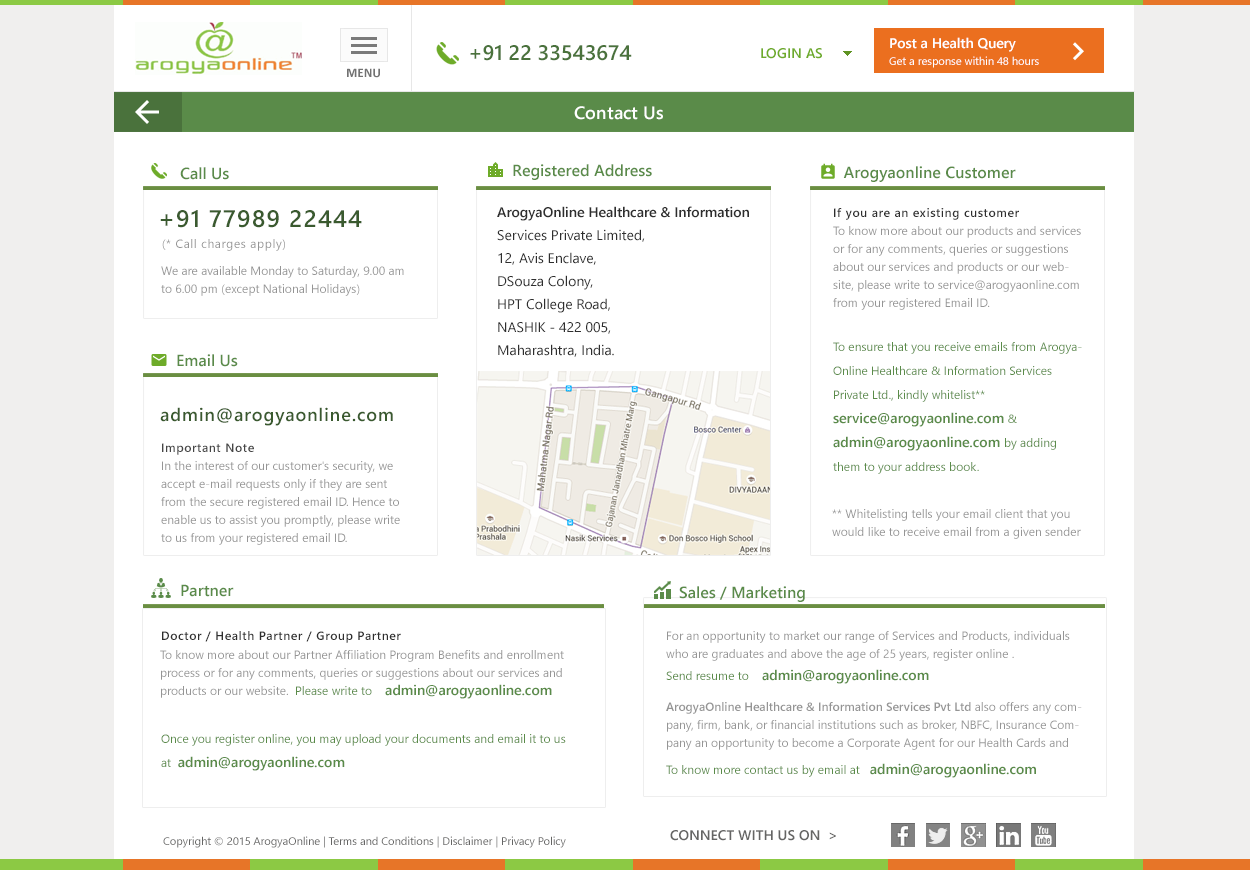
<style>
.page{position:relative;width:1250px;height:870px;background:#ffffff}
.page>*{position:absolute;margin:0}
.t1{font:14px "SegoeUI-Semibold";color:#ffffff}
.t2{font:21px "SegoeUI-Semibold";color:#4a723c}
.t3{font:14px "SegoeUI-Semibold";color:#6eab29;text-transform:uppercase}
.t4{font:11px "SegoeUI";color:#ffffff}
.t5{font:13px "Calibri-Bold";color:#727272;text-transform:uppercase}
.t6{font:18px "SegoeUI-Semibold";color:#ffffff}
.t7{font:16px "SegoeUI-Semibold";color:#5a8b49}
.t8{font:14px/23px "SegoeUI";color:#2e2e2e}
.t9{font:14px/23px "SegoeUI-Semibold";color:#2e2e2e}
.t10{font:12px "SegoeUI-Semibold";letter-spacing:0.05em;color:#2e2e2e}
.t11{font:24px "SegoeUI-Semibold";letter-spacing:0.05em;color:#3a5a2f}
.t12{font:12px/18px "SegoeUI";color:#959595}
.t13{font:12px "SegoeUI";letter-spacing:0.05em;color:#959595}
.t14{font:12px/24px "SegoeUI";color:#5a8b49}
.t15{font:14px/24px "SegoeUI-Semibold";color:#5a8b49}
.t16{font:18px "SegoeUI-Semibold";letter-spacing:0.05em;color:#3a5a2f}
.t17{font:12px "SegoeUI-Semibold";letter-spacing:0.05em;color:#454545}
.t18{font:14px "SegoeUI-Semibold";color:#5a8b49}
.t19{font:12px "SegoeUI";color:#5a8b49}
.t20{font:12px/18px "SegoeUI-Semibold";color:#959595}
.t21{font:14px "SegoeUI-Semibold";color:#656564}
.t22{font:11px "SegoeUI";color:#656564}
</style>
<div class="page">
<p class="t1" style="left:890px;top:37px;width:126px;height:15px">Post a Health Query</p>
<p class="t2" style="left:470px;top:45px;width:162px;height:16px">+91 22 33543674</p>
<p class="t3" style="left:761px;top:48px;width:61px;height:11px">Login As</p>
<p class="t4" style="left:889px;top:56px;width:150px;height:12px">Get a response within 48 hours</p>
<p class="t5" style="left:347px;top:68px;width:33px;height:10px">Menu</p>
<p class="t6" style="left:574px;top:106px;width:89px;height:14px">Contact Us</p>
<p class="t7" style="left:180px;top:167px;width:49px;height:13px">Call Us</p>
<p class="t7" style="left:513px;top:164px;width:139px;height:16px">Registered Address</p>
<p class="t7" style="left:843px;top:166px;width:173px;height:16px">Arogyaonline Customer</p>
<p class="t8" style="left:497px;top:206px;width:252px;height:151px"><span class="t9">ArogyaOnline Healthcare &amp; Information </span>Services Private Limited,<br>12, Avis Enclave,<br>DSouza Colony,<br>HPT College Road,<br>NASHIK - 422 005,<br>Maharashtra, India.</p>
<p class="t10" style="left:834px;top:208px;width:185px;height:12px">If you are an existing customer</p>
<p class="t11" style="left:160px;top:210px;width:202px;height:18px">+91 77989 22444</p>
<p class="t12" style="left:833px;top:226px;width:248px;height:84px">To know more about our products and services or for any comments, queries or suggestions about our services and products or our website, please write to service@arogyaonline.com from your registered Email ID.</p>
<p class="t13" style="left:162px;top:239px;width:123px;height:12px">(* Call charges apply)</p>
<p class="t12" style="left:161px;top:266px;width:243px;height:30px">We are available Monday to Saturday, 9.00 am to 6.00 pm (except National Holidays)</p>
<p class="t14" style="left:833px;top:342px;width:249px;height:132px">To ensure that you receive emails from ArogyaOnline Healthcare &amp; Information Services Private Ltd., kindly whitelist** <span class="t15">service@arogyaonline.com </span>&amp; <span class="t15">admin@arogyaonline.com </span>by adding them to your address book.</p>
<p class="t7" style="left:177px;top:354px;width:61px;height:13px">Email Us</p>
<p class="t16" style="left:160px;top:407px;width:233px;height:19px">admin@arogyaonline.com</p>
<p class="t17" style="left:162px;top:443px;width:92px;height:12px">Important Note</p>
<p class="t12" style="left:161px;top:461px;width:239px;height:84px">In the interest of our customer's security, we accept e-mail requests only if they are sent from the secure registered email ID. Hence to enable us to assist you promptly, please write to us from your registered email ID.</p>
<p class="t12" style="left:832px;top:509px;width:249px;height:30px">** Whitelisting tells your email client that you would like to receive email from a given sender</p>
<p class="t7" style="left:181px;top:584px;width:53px;height:13px">Partner</p>
<p class="t7" style="left:679px;top:586px;width:126px;height:16px">Sales / Marketing</p>
<p class="t10" style="left:162px;top:631px;width:239px;height:12px">Doctor / Health Partner / Group Partner</p>
<p class="t12" style="left:666px;top:631px;width:404px;height:30px">For an opportunity to market our range of Services and Products, individuals who are graduates and above the age of 25 years, register online .</p>
<p class="t12" style="left:160px;top:650px;width:404px;height:48px">To know more about our Partner Affiliation Program Benefits and enrollment process or for any comments, queries or suggestions about our services and products or our website.</p>
<p class="t18" style="left:666px;top:669px;width:263px;height:15px"><span class="t19">Send resume to    </span>admin@arogyaonline.com</p>
<p class="t18" style="left:296px;top:684px;width:256px;height:15px"><span class="t19">Please write to    </span>admin@arogyaonline.com</p>
<p class="t12" style="left:666px;top:702px;width:416px;height:48px"><span class="t20">ArogyaOnline Healthcare &amp; Information Services Pvt Ltd </span>also offers any company, firm, bank, or financial institutions such as broker, NBFC, Insurance Company an opportunity to become a Corporate Agent for our Health Cards and Membership program</p>
<p class="t14" style="left:161px;top:734px;width:405px;height:37px">Once you register online, you may upload your documents and email it to us at  <span class="t15">admin@arogyaonline.com</span></p>
<p class="t19" style="left:666px;top:763px;width:370px;height:15px">To know more contact us by email at   <span class="t18">admin@arogyaonline.com</span></p>
<p class="t21" style="left:670px;top:830px;width:166px;height:11px">CONNECT WITH US ON  &gt;</p>
<p class="t22" style="left:163px;top:836px;width:403px;height:12px">Copyright © 2015 ArogyaOnline | Terms and Conditions | Disclaimer | Privacy Policy</p>
</div>
